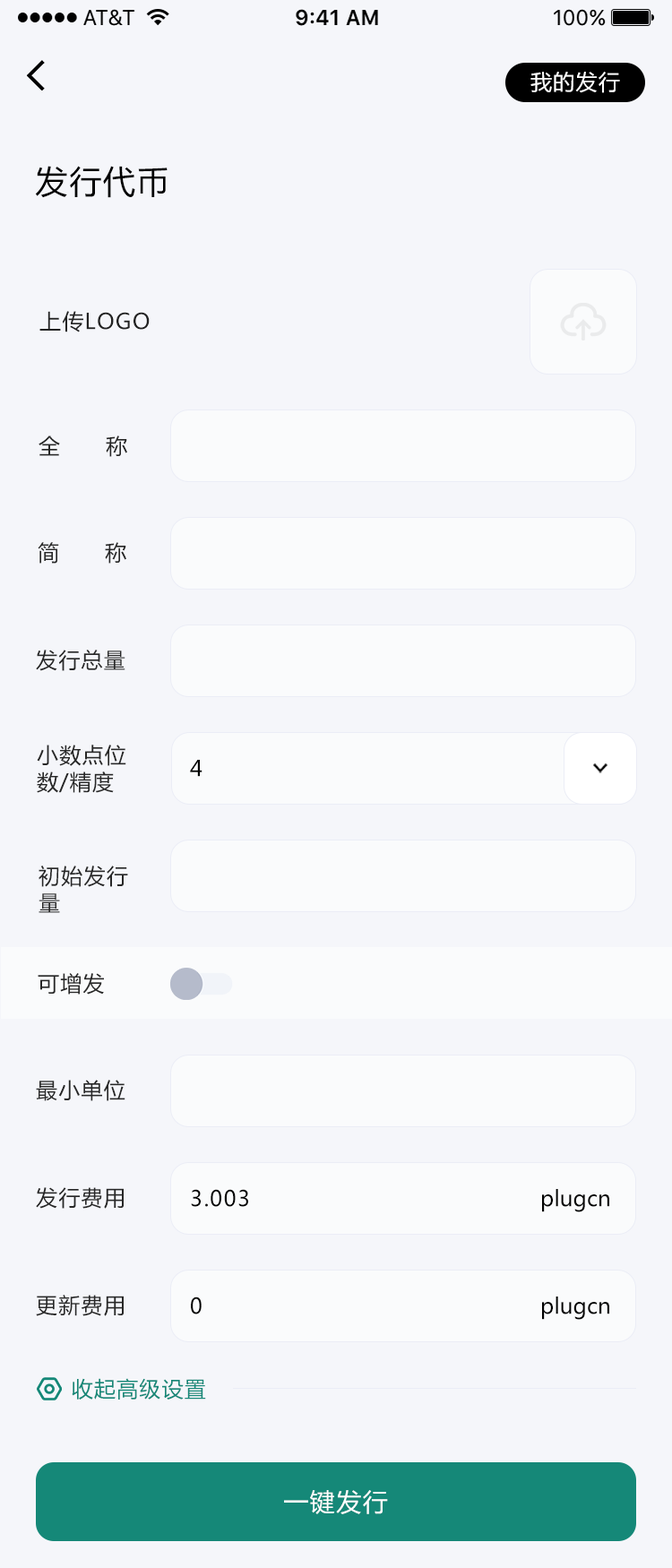
<style>
.page{position:relative;width:672px;height:1568px;background:#f5f6fa}
.page>*{position:absolute;margin:0}
.t1{font:21.5px "MicrosoftYaHei";letter-spacing:0.05em;color:#ffffff}
.t2{font:32.3px "MicrosoftYaHei";letter-spacing:0.05em;color:#000000}
.t3{font:21.5px "MicrosoftYaHei";letter-spacing:0.05em;color:#222222}
.t4{font:21.5px "MicrosoftYaHei";letter-spacing:0.05em;color:#272727}
.t5{font:21.5px/26.9px "MicrosoftYaHei";letter-spacing:0.05em;color:#272727}
.t6{font:21.5px "MicrosoftYaHei";letter-spacing:0.05em;color:#000000}
.t7{font:21.5px "MicrosoftYaHei";color:#000000}
.t8{font:21.5px "MicrosoftYaHei";letter-spacing:0.05em;color:#158878}
.t9{font:25.1px "MicrosoftYaHei";letter-spacing:0.05em;color:#ffffff}
</style>
<div class="page">
<p class="t1" style="left:530px;top:72px;width:90px;height:21px">我的发行</p>
<p class="t2" style="left:35px;top:166px;width:133px;height:32px">发行代币</p>
<p class="t3" style="left:39px;top:311px;width:111px;height:21px">上传LOGO</p>
<p class="t4" style="left:39px;top:435px;width:88px;height:22px">全      称</p>
<p class="t4" style="left:38px;top:542px;width:88px;height:22px">简      称</p>
<p class="t4" style="left:36px;top:650px;width:89px;height:21px">发行总量</p>
<p class="t5" style="left:37px;top:745px;width:89px;height:48px">小数点位<br>数/精度</p>
<p class="t6" style="left:190px;top:760px;width:12px;height:17px">4</p>
<p class="t5" style="left:39px;top:866px;width:89px;height:47px">初始发行<br>量</p>
<p class="t4" style="left:38px;top:973px;width:66px;height:22px">可增发</p>
<p class="t4" style="left:36px;top:1080px;width:89px;height:21px">最小单位</p>
<p class="t4" style="left:36px;top:1187px;width:88px;height:22px">发行费用</p>
<p class="t6" style="left:191px;top:1189px;width:57px;height:18px">3.003</p>
<p class="t7" style="left:542px;top:1189px;width:67px;height:23px">plugcn</p>
<p class="t4" style="left:36px;top:1295px;width:88px;height:21px">更新费用</p>
<p class="t6" style="left:191px;top:1297px;width:11px;height:17px">0</p>
<p class="t7" style="left:542px;top:1297px;width:67px;height:23px">plugcn</p>
<p class="t8" style="left:72px;top:1378px;width:134px;height:22px">收起高级设置</p>
<p class="t9" style="left:284px;top:1490px;width:104px;height:24px">一键发行</p>
</div>
